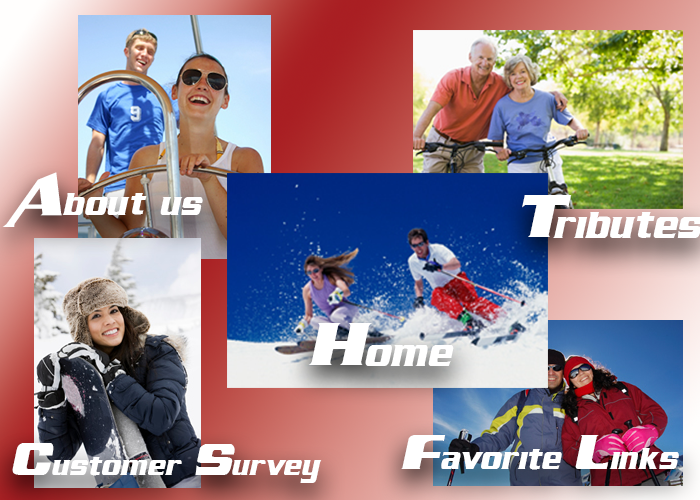
<style>
.page{position:relative;width:700px;height:500px}
.page>*{position:absolute;margin:0}
.t1{font:54.2px "AirMillhouseItalic";color:#ffffff}
.t2{font:62.5px "AirMillhouseItalic";color:#ffffff}
.t3{font:50px "AirMillhouseItalic";color:#ffffff}
.t4{font:45.8px "AirMillhouseItalic";color:#ffffff}
</style>
<div class="page">
<p class="t1" style="left:2px;top:172px;width:201px;height:55px">About us</p>
<p class="t2" style="left:308px;top:323px;width:146px;height:43px">Home</p>
<p class="t3" style="left:401px;top:435px;width:278px;height:35px">Favorite Links</p>
<p class="t4" style="left:12px;top:443px;width:310px;height:40px">Customer Survey</p>
</div>
